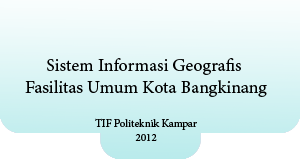
<style>
.page{position:relative;width:300px;height:159px}
.page>*{position:absolute;margin:0}
.t1{font:18px "MinionPro-Regular";color:#000000}
.t2{font:11px "MinionPro-Regular";color:#000000}
</style>
<div class="page">
<p class="t1" style="left:25px;top:58px;width:242px;height:83px;text-align:center">Sistem Informasi Geografis <br>Fasilitas Umum Kota Bangkinang<br><br><span class="t2">TIF Politeknik Kampar<br>2012</span></p>
</div>
